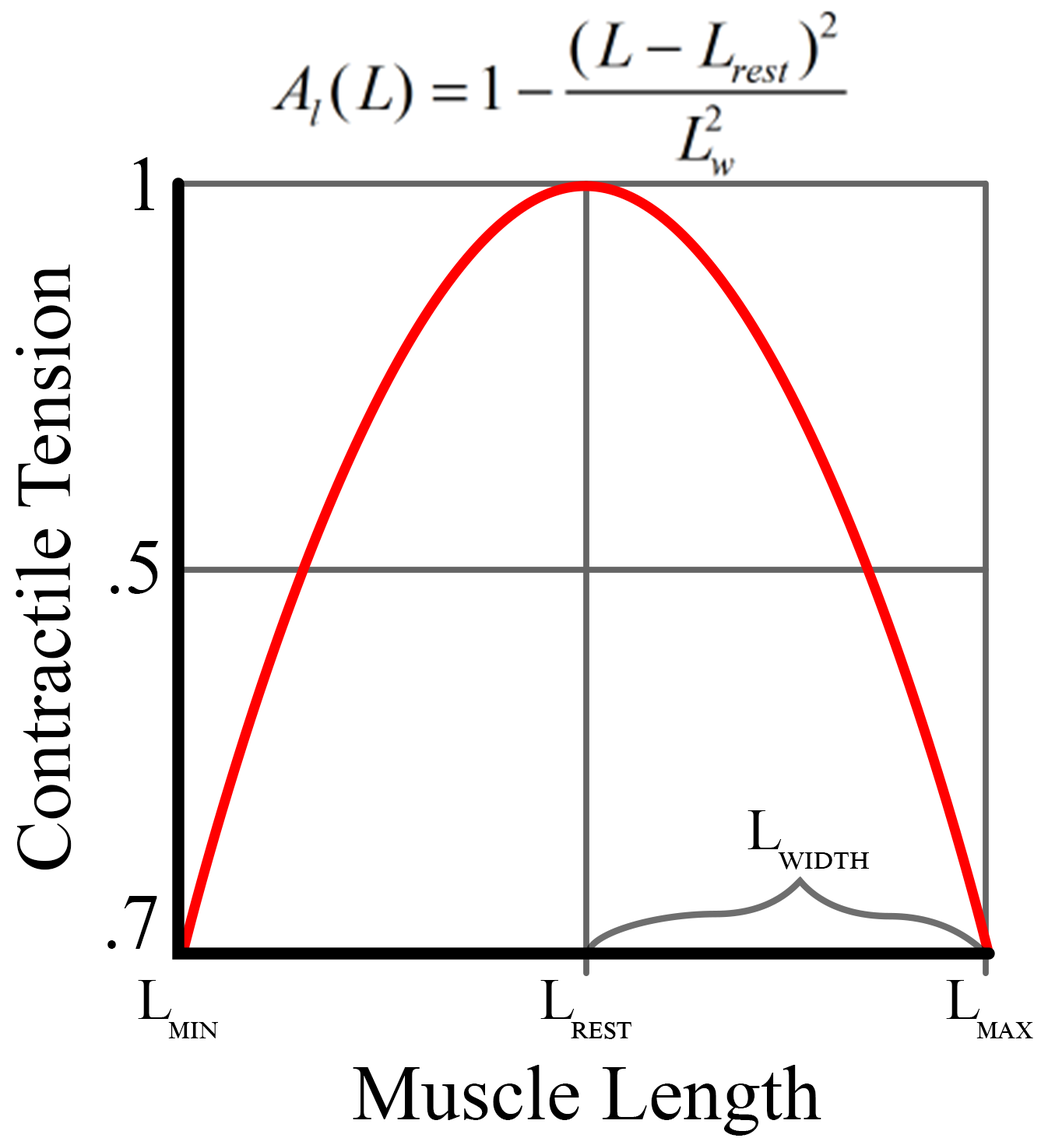
<style>
.page{position:relative;width:1048px;height:1138px;background:#ffffff}
.page>*{position:absolute;margin:0}
.t1{font:77.8px "TimesNewRomanPSMT";color:#000000}
.t2{font:58.4px "TimesNewRomanPSMT";color:#000000;font-variant:small-caps}
.t3{font:58.4px "TimesNewRomanPSMT";letter-spacing:-0.08em;color:#000000}
</style>
<div class="page">
<p class="t1" style="left:133px;top:157px;width:21px;height:53px">1</p>
<p class="t1" style="left:16px;top:264px;width:56px;height:606px;rotate:-90deg">Contractile Tension</p>
<p class="t1" style="left:111px;top:541px;width:48px;height:53px">.5</p>
<p class="t2" style="left:747px;top:810px;width:122px;height:60px"><span class="t3">L</span>width</p>
<p class="t1" style="left:107px;top:896px;width:50px;height:53px">.7</p>
<p class="t2" style="left:138px;top:980px;width:80px;height:58px"><span class="t3">L</span>min</p>
<p class="t2" style="left:540px;top:980px;width:91px;height:59px"><span class="t3">L</span>rest</p>
<p class="t2" style="left:946px;top:980px;width:87px;height:58px"><span class="t3">L</span>max</p>
<p class="t1" style="left:353px;top:1065px;width:468px;height:71px">Muscle Length</p>
</div>
